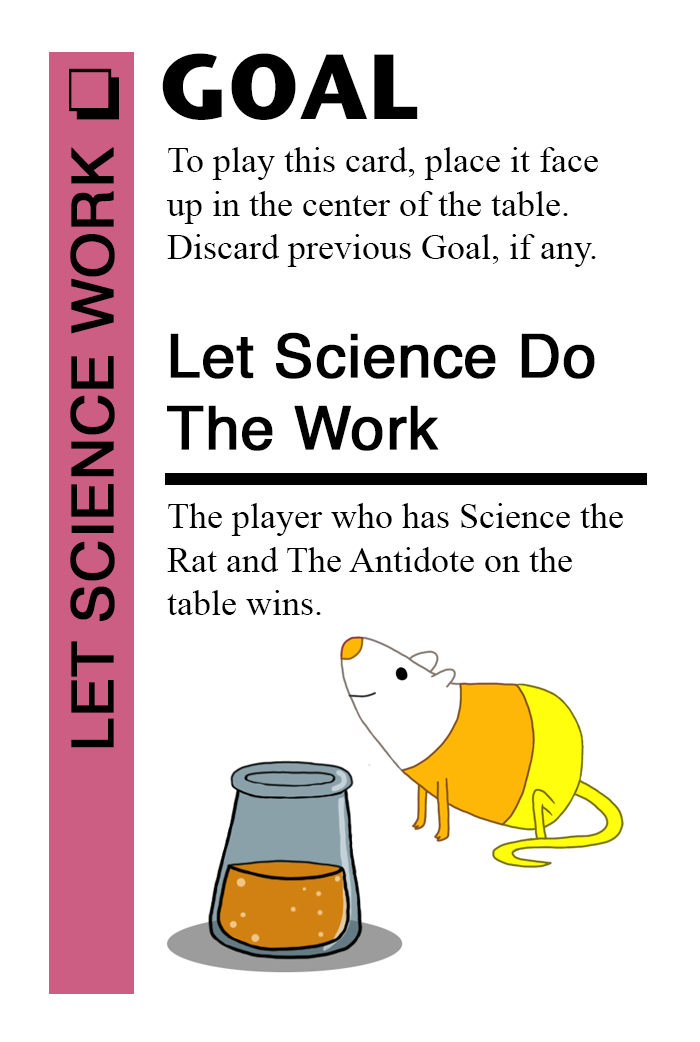
<style>
.page{position:relative;width:700px;height:1042px;background:#ffffff}
.page>*{position:absolute;margin:0}
.t1{font:92px "StoneSansITC-Bold";color:#000000}
.t2{font:72px "MS-Gothic";color:#000000}
.t3{font:58px "Helvetica";color:#000000;font-weight:bold}
.t4{font:36px "TimesNewRomanPSMT";color:#000000}
.t5{font:60px "Helvetica";color:#000000;font-weight:bold}
</style>
<div class="page">
<p class="t1" style="left:162px;top:53px;width:256px;height:67px">GOAL</p>
<p class="t2" style="left:69px;top:68px;width:50px;height:52px">❏</p>
<p class="t3" style="left:70px;top:147px;width:45px;height:601px;rotate:-90deg">LET SCIENCE WORK</p>
<p class="t4" style="left:167px;top:147px;width:431px;height:120px">To play this card, place it face<br>up in the center of the table.<br>Discard previous Goal, if any.</p>
<p class="t5" style="left:167px;top:332px;width:428px;height:119px">Let Science Do<br>The Work</p>
<p class="t4" style="left:167px;top:503px;width:456px;height:112px">The player who has Science the <br>Rat and The Antidote on the <br>table wins.</p>
</div>
